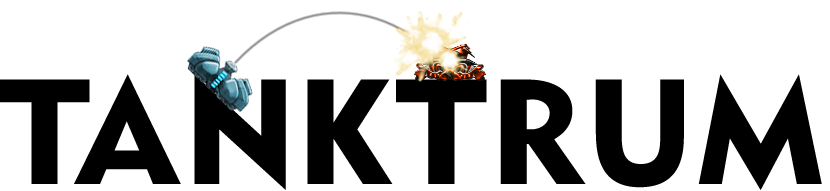
<style>
.page{position:relative;width:830px;height:191px;background:#ffffff}
.page>*{position:absolute;margin:0}
.t1{font:144.8px "GothicCGNo3";color:#000000}
</style>
<div class="page">
<p class="t1" style="left:0px;top:74px;width:822px;height:116px">TANKTRUM</p>
</div>
